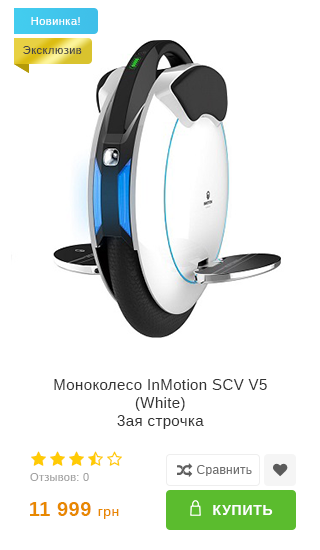
<style>
.page{position:relative;width:320px;height:550px;background:#ffffff}
.page>*{position:absolute;margin:0}
.t1{font:11px "Arimo";letter-spacing:0.045em;color:#ffffff}
.t2{font:11px "Arimo";letter-spacing:0.045em;color:#454545}
.t3{font:15px "Arimo";letter-spacing:0.025em;color:#333333}
.t4{font:11px "Arimo";letter-spacing:0.025em;color:#a3a3a3}
.t5{font:12px "Arimo";letter-spacing:0.025em;color:#707070}
.t6{font:20px "Arimo-Bold";letter-spacing:0.025em;color:#e88800}
.t7{font:14px "Arimo";letter-spacing:0.025em;color:#e88800}
.t8{font:14px "Arimo-Bold";letter-spacing:0.05em;color:#ffffff}
</style>
<div class="page">
<p class="t1" style="left:31px;top:17px;width:49px;height:8px">Новинка!</p>
<p class="t2" style="left:23px;top:46px;width:59px;height:8px">Эксклюзив</p>
<p class="t3" style="left:54px;top:379px;width:213px;height:50px;text-align:center">Моноколесо InMotion SCV V5<br>(White)<br>3ая строчка</p>
<p class="t4" style="left:30px;top:473px;width:59px;height:8px">Отзывов: 0</p>
<p class="t5" style="left:197px;top:465px;width:55px;height:11px">Сравнить</p>
<p class="t6" style="left:30px;top:502px;width:89px;height:17px">11 999 <span class="t7">грн</span></p>
<p class="t8" style="left:213px;top:505px;width:60px;height:10px">КУПИТЬ</p>
</div>
